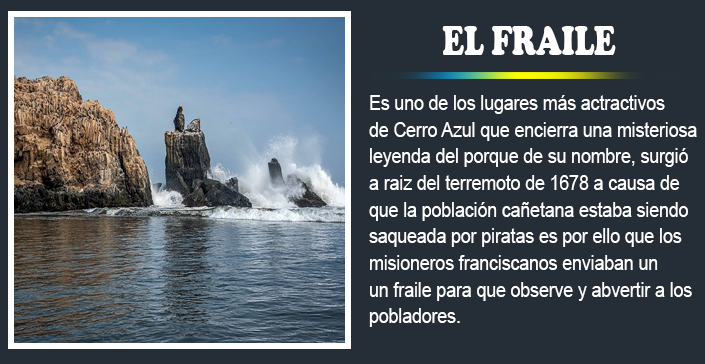
<style>
.page{position:relative;width:705px;height:364px;background:#252e37}
.page>*{position:absolute;margin:0}
.t1{font:43.1px "CooperBlack";color:#ffffff;scale:0.72 1}
.t2{font:21.1px/26.7px "ArialMT";color:#ffffff;scale:0.83 1}
</style>
<div class="page">
<p class="t1" style="left:442px;top:26px;width:174px;height:29px">EL FRAILE</p>
<p class="t2" style="left:369px;top:95px;width:328px;height:232px">Es uno de los lugares más actractivos <br>de Cerro Azul que encierra una misteriosa<br>leyenda del porque de su nombre, surgió<br>a raiz del terremoto de 1678 a causa de <br>que la población cañetana estaba siendo <br>saqueada por piratas es por ello que los <br>misioneros franciscanos enviaban un <br>un fraile para que observe y abvertir a los <br>pobladores.</p>
</div>
